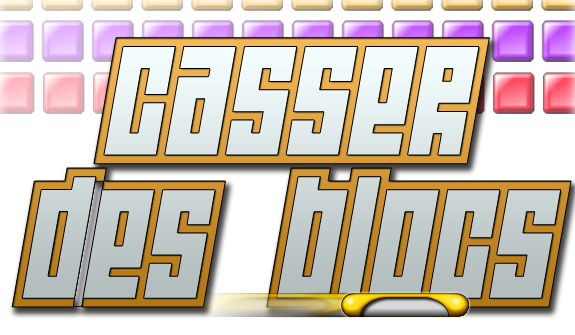
<style>
.page{position:relative;width:575px;height:335px;background:#ffffff}
.page>*{position:absolute;margin:0}
.t1{font:144.6px/143.2px "Wideawake"}
.t2{font:144.6px/143.2px "WideawakeBlack"}
</style>
<div class="page">
<p class="t1" style="left:12px;top:37px;width:559px;height:270px;text-align:center">casser<br>des blocs</p>
<p class="t2" style="left:22px;top:46px;width:539px;height:253px;text-align:center">casser<br>des blocs</p>
</div>
